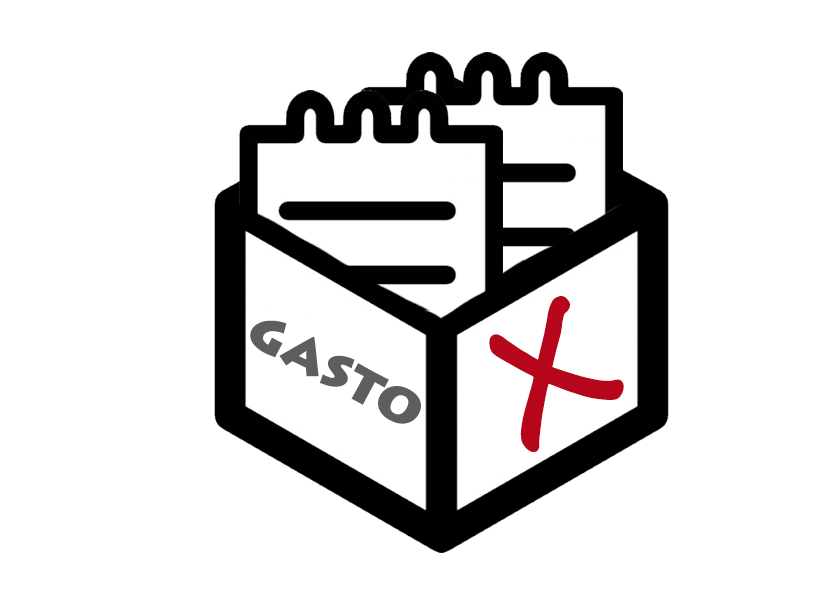
<style>
.page{position:relative;width:819px;height:607px;background:#ffffff}
.page>*{position:absolute;margin:0}
.t1{font:160.6px "SegoeScript-Bold";color:#b5061b}
.t2{font:57px "LithosPro-Black";color:#605d5e}
</style>
<div class="page">
<p class="t1" style="left:489px;top:296px;width:135px;height:156px;rotate:-31deg">X</p>
<p class="t2" style="left:250px;top:320px;width:171px;height:104px;rotate:28deg">gasto</p>
</div>
